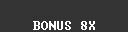
<style>
.page{position:relative;width:128px;height:32px;background:#333333}
.page>*{position:absolute;margin:0}
.t1{font:12px "Terminal";color:#ffffff}
</style>
<div class="page">
<p class="t1" style="left:33px;top:21px;width:62px;height:9px">BONUS 8X</p>
</div>
